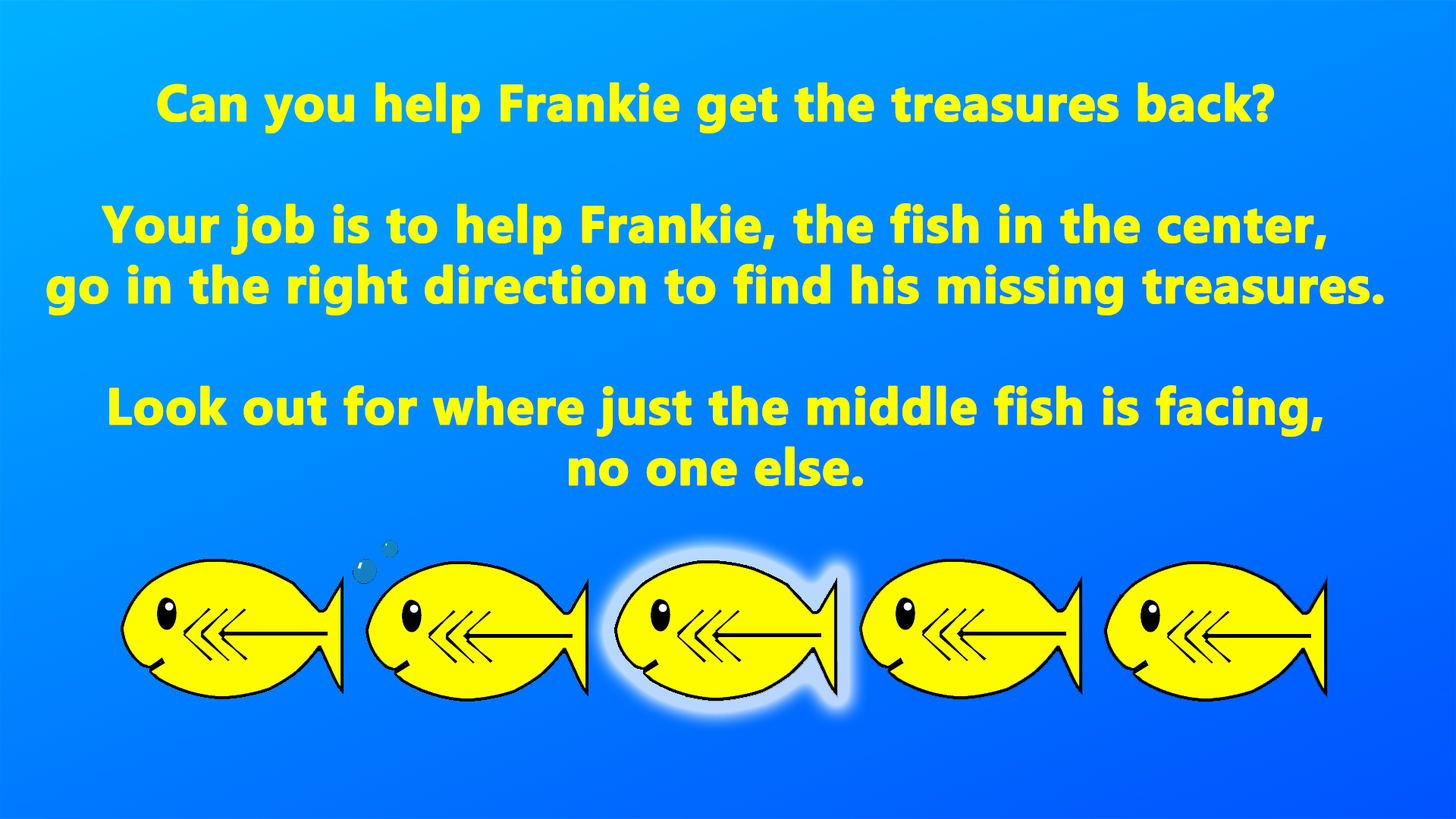
<style>
.page{position:relative;width:1456px;height:819px}
.page>*{position:absolute;margin:0}
.t1{font:50.6px "MyanmarText-Bold";color:#ffff00;font-weight:bold}
</style>
<div class="page">
<p class="t1" style="left:46px;top:82px;width:1338px;height:404px;text-align:center">Can you help Frankie get the treasures back?<br><br>Your job is to help Frankie, the fish in the center,<br>go in the right direction to find his missing treasures.<br><br>Look out for where just the middle fish is facing,<br>no one else.</p>
</div>
